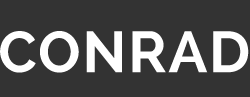
<style>
.page{position:relative;width:250px;height:97px;background:#333333}
.page>*{position:absolute;margin:0}
.t1{font:57.7px "Raleway-Bold";letter-spacing:0.03em;color:#ffffff}
</style>
<div class="page">
<p class="t1" style="left:0px;top:31px;width:249px;height:42px">CONRAD</p>
</div>
